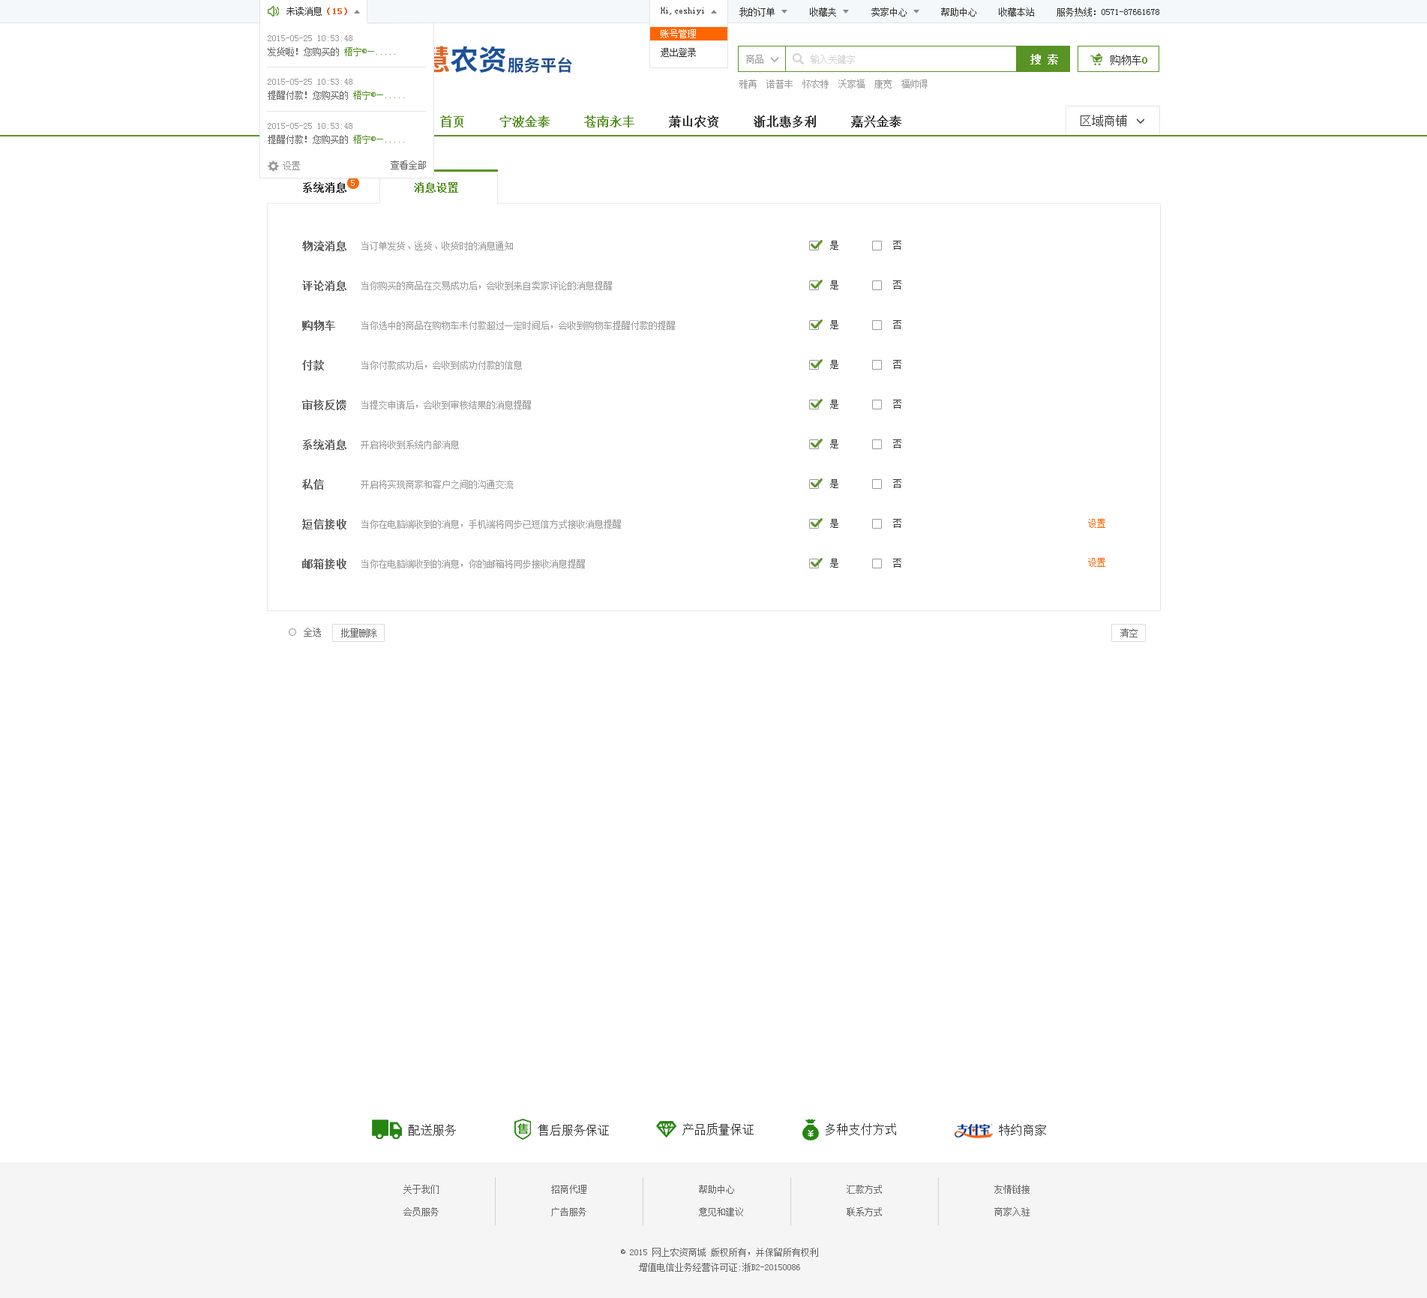
<style>
.page{position:relative;width:1427px;height:1298px;background:#ffffff}
.page>*{position:absolute;margin:0}
.t1{font:9px "SimSun";color:#333333}
.t2{font:9px "SimSun";color:#e0631f;font-weight:bold}
.t3{font:9px/18.8px "SimSun";color:#ffffff}
.t4{font:9px/18.8px "SimSun";color:#333333}
.t5{font:9px/13.5px "SimSun";color:#999999}
.t6{font:9px/7px "SimSun";color:#666666}
.t7{font:9px/7px "SimSun";color:#589325}
.t8{font:28.4px "SourceHanSansCN-Bold"}
.t9{font:10.5px "SimSun";color:#ffffff;font-weight:bold}
.t10{font:16.3px "SourceHanSansCN-Bold";color:#194f93}
.t11{font:9px "SimSun";color:#999999}
.t12{font:9px "SimSun";color:#d1d1d1}
.t13{font:10.5px "SimSun";color:#333333}
.t14{font:10.5px "SimSun";color:#589325;font-weight:bold}
.t15{font:12px "SimSun";color:#333333;font-weight:bold}
.t16{font:12px "SimSun";color:#589325;font-weight:bold}
.t17{font:12px "SimSun";color:#333333}
.t18{font:9px "SimSun";color:#666666}
.t19{font:10.5px "SimSun";color:#333333;font-weight:bold}
.t20{font:9px "SimSun";color:#ffffff}
.t21{font:10.5px "SimSun";color:#666666;font-weight:bold}
.t22{font:9px "SimSun";color:#ff6600}
.t23{font:9px/22.5px "SimSun";color:#666666}
.t24{font:9px/15px "SimSun";color:#666666}
</style>
<div class="page">
<p class="t1" style="left:286px;top:7px;width:61px;height:9px">未读消息<span class="t2">（15）</span></p>
<p class="t1" style="left:286px;top:7px;width:61px;height:9px">未读消息<span class="t2">（15）</span></p>
<p class="t1" style="left:661px;top:8px;width:43px;height:7px">Hi,ceshiyi</p>
<p class="t1" style="left:661px;top:8px;width:43px;height:7px">Hi,ceshiyi</p>
<p class="t1" style="left:740px;top:8px;width:35px;height:8px">我的订单</p>
<p class="t1" style="left:810px;top:8px;width:26px;height:8px">收藏夹</p>
<p class="t1" style="left:872px;top:8px;width:35px;height:8px">卖家中心</p>
<p class="t1" style="left:941px;top:8px;width:35px;height:8px">帮助中心</p>
<p class="t1" style="left:999px;top:8px;width:35px;height:8px">收藏本站</p>
<p class="t1" style="left:1057px;top:8px;width:103px;height:8px">服务热线：0571-87661678</p>
<p class="t3" style="left:661px;top:29px;width:35px;height:28px">账号管理<br><span class="t4">退出登录</span></p>
<p class="t5" style="left:268px;top:35px;width:127px;height:21px">2015-05-25 10:53:48<br><span class="t6">发货啦！您购买的 </span><span class="t7">梧宁®—.....</span></p>
<p class="t8" style="left:394px;top:46px;width:112px;height:27px">智慧农资</p>
<p class="t9" style="left:1030px;top:54px;width:28px;height:10px">搜 索</p>
<p class="t10" style="left:508px;top:57px;width:64px;height:16px">服务平台</p>
<p class="t11" style="left:746px;top:55px;width:18px;height:9px">商品</p>
<p class="t12" style="left:811px;top:55px;width:44px;height:9px">输入关键字</p>
<p class="t13" style="left:1111px;top:55px;width:37px;height:10px">购物车<span class="t14">0</span></p>
<p class="t5" style="left:268px;top:79px;width:136px;height:21px">2015-05-25 10:53:48<br><span class="t6">提醒付款！您购买的 </span><span class="t7">梧宁®—.....</span></p>
<p class="t11" style="left:740px;top:80px;width:188px;height:8px">雅苒  诺普丰  怀农特  沃家福  康宽  福帅得</p>
<p class="t5" style="left:268px;top:123px;width:136px;height:21px">2015-05-25 10:53:48<br><span class="t6">提醒付款！您购买的 </span><span class="t7">梧宁®—.....</span></p>
<p class="t15" style="left:440px;top:116px;width:462px;height:12px"><span class="t16">首页     宁波金泰     苍南永丰    </span> 萧山农资     浙北惠多利     嘉兴金泰</p>
<p class="t17" style="left:1081px;top:115px;width:46px;height:12px">区域商铺</p>
<p class="t11" style="left:283px;top:161px;width:17px;height:9px">设置</p>
<p class="t18" style="left:391px;top:160px;width:35px;height:10px">查看全部</p>
<p class="t19" style="left:303px;top:182px;width:43px;height:11px">系统消息</p>
<p class="t20" style="left:351px;top:180px;width:4px;height:6px">5</p>
<p class="t14" style="left:414px;top:182px;width:44px;height:11px">消息设置</p>
<p class="t21" style="left:302px;top:241px;width:44px;height:10px">物流消息</p>
<p class="t11" style="left:362px;top:242px;width:151px;height:8px">当订单发货、送货、收货时的消息通知</p>
<p class="t1" style="left:830px;top:241px;width:8px;height:9px">是</p>
<p class="t1" style="left:893px;top:241px;width:9px;height:9px">否</p>
<p class="t21" style="left:302px;top:280px;width:44px;height:11px">评论消息</p>
<p class="t11" style="left:362px;top:281px;width:250px;height:9px">当你购买的商品在交易成功后，会收到来自卖家评论的消息提醒</p>
<p class="t1" style="left:830px;top:280px;width:8px;height:10px">是</p>
<p class="t1" style="left:893px;top:280px;width:9px;height:10px">否</p>
<p class="t21" style="left:302px;top:320px;width:33px;height:11px">购物车</p>
<p class="t11" style="left:362px;top:321px;width:313px;height:9px">当你选中的商品在购物车未付款超过一定时间后，会收到购物车提醒付款的提醒</p>
<p class="t1" style="left:830px;top:320px;width:8px;height:9px">是</p>
<p class="t1" style="left:893px;top:320px;width:9px;height:9px">否</p>
<p class="t21" style="left:302px;top:360px;width:22px;height:10px">付款</p>
<p class="t11" style="left:362px;top:361px;width:160px;height:9px">当你付款成功后，会收到成功付款的信息</p>
<p class="t1" style="left:830px;top:360px;width:8px;height:9px">是</p>
<p class="t1" style="left:893px;top:360px;width:9px;height:9px">否</p>
<p class="t21" style="left:302px;top:400px;width:44px;height:10px">审核反馈</p>
<p class="t11" style="left:362px;top:400px;width:169px;height:10px">当提交申请后，会收到审核结果的消息提醒</p>
<p class="t1" style="left:830px;top:400px;width:8px;height:9px">是</p>
<p class="t1" style="left:893px;top:400px;width:9px;height:9px">否</p>
<p class="t21" style="left:303px;top:440px;width:43px;height:10px">系统消息</p>
<p class="t11" style="left:361px;top:440px;width:98px;height:9px">开启将收到系统内部消息</p>
<p class="t1" style="left:830px;top:440px;width:8px;height:8px">是</p>
<p class="t1" style="left:893px;top:440px;width:9px;height:8px">否</p>
<p class="t21" style="left:302px;top:479px;width:22px;height:11px">私信</p>
<p class="t11" style="left:361px;top:480px;width:152px;height:9px">开启将实现商家和客户之间的沟通交流</p>
<p class="t1" style="left:830px;top:479px;width:8px;height:9px">是</p>
<p class="t1" style="left:893px;top:479px;width:9px;height:9px">否</p>
<p class="t21" style="left:302px;top:519px;width:44px;height:11px">短信接收</p>
<p class="t11" style="left:362px;top:520px;width:259px;height:9px">当你在电脑端收到的消息，手机端将同步已短信方式接收消息提醒</p>
<p class="t1" style="left:830px;top:519px;width:8px;height:9px">是</p>
<p class="t1" style="left:893px;top:519px;width:9px;height:9px">否</p>
<p class="t22" style="left:1088px;top:519px;width:18px;height:9px">设置</p>
<p class="t22" style="left:1088px;top:558px;width:18px;height:9px">设置</p>
<p class="t21" style="left:302px;top:559px;width:44px;height:10px">邮箱接收</p>
<p class="t11" style="left:362px;top:560px;width:223px;height:8px">当你在电脑端收到的消息，你的邮箱将同步接收消息提醒</p>
<p class="t1" style="left:830px;top:559px;width:8px;height:9px">是</p>
<p class="t1" style="left:893px;top:559px;width:9px;height:9px">否</p>
<p class="t18" style="left:304px;top:628px;width:17px;height:9px">全选</p>
<p class="t18" style="left:341px;top:628px;width:35px;height:10px">批量删除</p>
<p class="t18" style="left:1120px;top:628px;width:18px;height:10px">清空</p>
<p class="t17" style="left:409px;top:1124px;width:47px;height:12px">配送服务</p>
<p class="t17" style="left:538px;top:1124px;width:71px;height:12px">售后服务保证</p>
<p class="t17" style="left:682px;top:1124px;width:72px;height:12px">产品质量保证</p>
<p class="t17" style="left:826px;top:1124px;width:70px;height:12px">多种支付方式</p>
<p class="t17" style="left:999px;top:1124px;width:47px;height:12px">特约商家</p>
<p class="t23" style="left:404px;top:1185px;width:35px;height:31px">关于我们<br>会员服务</p>
<p class="t23" style="left:551px;top:1185px;width:35px;height:31px">招商代理<br>广告服务</p>
<p class="t23" style="left:699px;top:1185px;width:44px;height:31px">帮助中心<br>意见和建议</p>
<p class="t23" style="left:847px;top:1185px;width:35px;height:31px">汇款方式<br>联系方式</p>
<p class="t23" style="left:994px;top:1185px;width:36px;height:31px">友情链接<br>商家入驻</p>
<p class="t24" style="left:621px;top:1248px;width:197px;height:24px;text-align:center">© 2015 网上农资商城 版权所有，并保留所有权利<br>增值电信业务经营许可证:浙B2-20150086</p>
</div>
